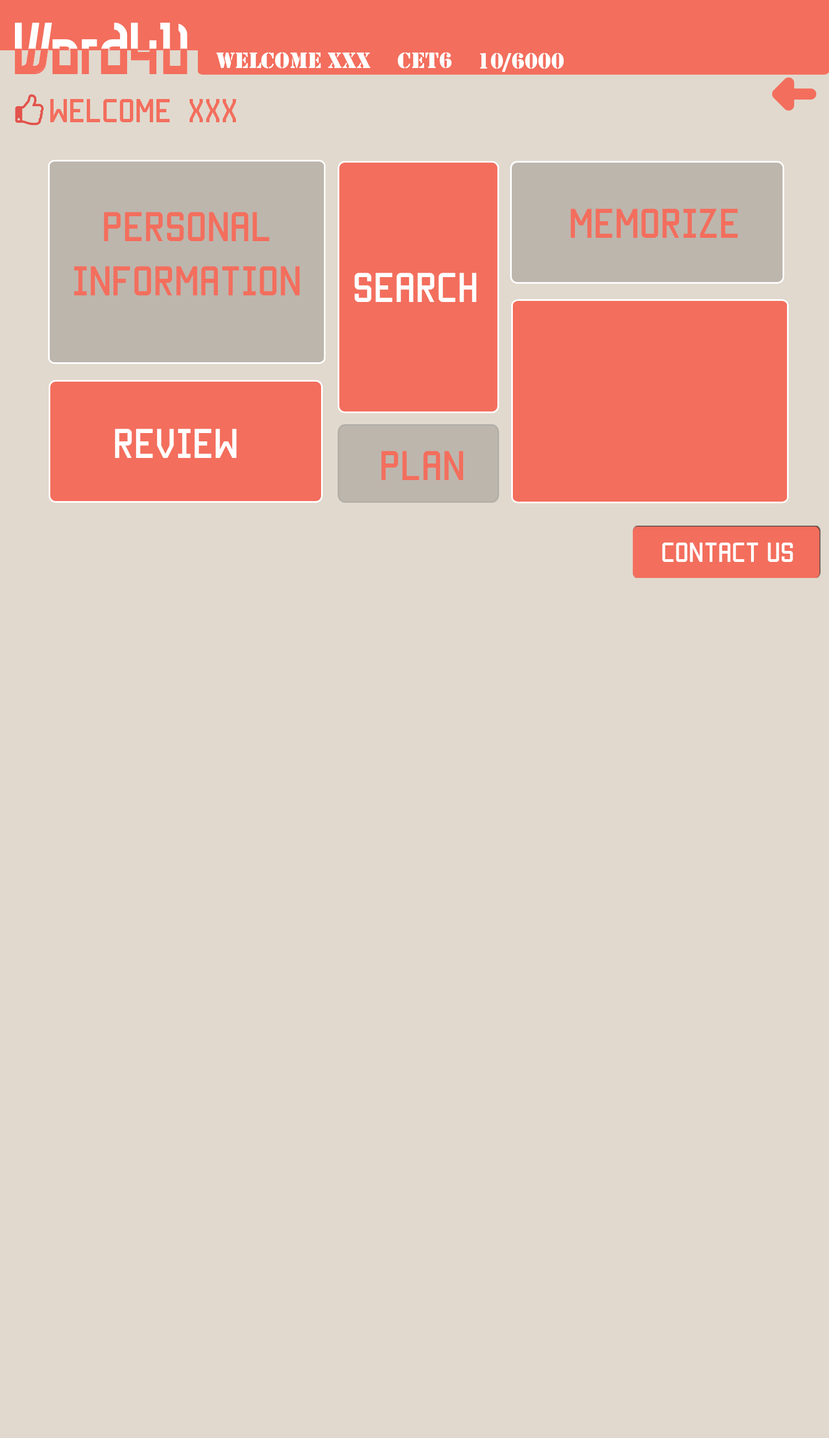
<style>
.page{position:relative;width:829px;height:1438px;background:#e1d9ce}
.page>*{position:absolute;margin:0}
.t1{font:23.2px "Stencil";color:#ffffff}
.t2{font:26.5px "Manteka";color:#f36e5d}
.t3{font:33.2px "Manteka";color:#f36e5d}
.t4{font:33.2px "Manteka";color:#ffffff}
.t5{font:22.1px "Manteka";color:#ffffff}
</style>
<div class="page">
<p class="t1" style="left:216px;top:52px;width:155px;height:17px">Welcome xxx</p>
<p class="t1" style="left:398px;top:52px;width:54px;height:17px">CET6</p>
<p class="t1" style="left:480px;top:53px;width:84px;height:19px">10/6000</p>
<p class="t2" style="left:50px;top:99px;width:186px;height:23px">Welcome  XXX</p>
<p class="t3" style="left:571px;top:208px;width:167px;height:30px">memorize</p>
<p class="t3" style="left:104px;top:212px;width:166px;height:29px">personal</p>
<p class="t3" style="left:74px;top:266px;width:226px;height:29px">information</p>
<p class="t4" style="left:354px;top:273px;width:123px;height:29px">search</p>
<p class="t4" style="left:115px;top:429px;width:122px;height:29px">review</p>
<p class="t3" style="left:382px;top:451px;width:81px;height:29px">PLAN</p>
<p class="t5" style="left:662px;top:542px;width:131px;height:20px">Contact us</p>
</div>
